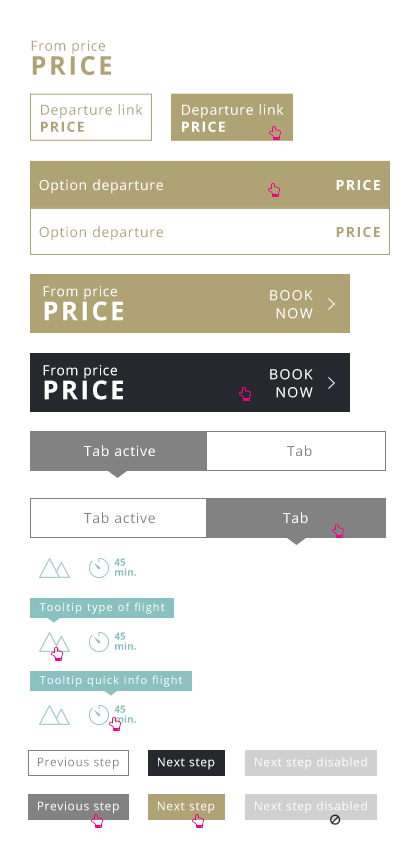
<style>
.page{position:relative;width:420px;height:854px;background:#ffffff}
.page>*{position:absolute;margin:0}
.t1{font:14px/18px "OpenSans";letter-spacing:0.05em;color:#afa376}
.t2{font:26px/24px "OpenSans-Bold";letter-spacing:0.1em;color:#afa376}
.t3{font:14px "OpenSans";letter-spacing:0.05em;color:#afa376}
.t4{font:14px "OpenSans";letter-spacing:0.05em;color:#ffffff}
.t5{font:14px "OpenSans-Bold";letter-spacing:0.1em;color:#afa376;text-transform:uppercase}
.t6{font:14px "OpenSans-Bold";letter-spacing:0.1em;color:#ffffff;text-transform:uppercase}
.t7{font:14px/18px "OpenSans";letter-spacing:0.05em;color:#ffffff}
.t8{font:26px/24px "OpenSans-Bold";letter-spacing:0.1em;color:#ffffff}
.t9{font:14px/18px "OpenSans";letter-spacing:0.1em;color:#ffffff;text-transform:uppercase}
.t10{font:14px "OpenSans";letter-spacing:0.05em;color:#828282}
.t11{font:10px/10px "OpenSans-Bold";color:#8ac0c0}
.t12{font:11px "OpenSans";letter-spacing:0.1em;color:#ffffff}
.t13{font:12px "OpenSans";letter-spacing:0.05em;color:#828282}
.t14{font:12px "OpenSans";letter-spacing:0.05em;color:#ffffff}
</style>
<div class="page">
<p class="t1" style="left:31px;top:40px;width:80px;height:35px">From price<br><span class="t2">PRICE</span></p>
<p class="t3" style="left:41px;top:104px;width:102px;height:14px">Departure link</p>
<p class="t4" style="left:182px;top:104px;width:102px;height:14px">Departure link</p>
<p class="t5" style="left:41px;top:121px;width:43px;height:11px">Price</p>
<p class="t6" style="left:182px;top:121px;width:43px;height:11px">Price</p>
<p class="t4" style="left:39px;top:179px;width:124px;height:15px">Option departure</p>
<p class="t6" style="left:336px;top:179px;width:44px;height:12px">price</p>
<p class="t3" style="left:39px;top:226px;width:124px;height:15px">Option departure</p>
<p class="t5" style="left:336px;top:226px;width:44px;height:12px">Price</p>
<p class="t7" style="left:43px;top:286px;width:80px;height:35px">From price<br><span class="t8">PRICE</span></p>
<p class="t9" style="left:270px;top:290px;width:43px;height:29px;text-align:right">book<br>now</p>
<p class="t7" style="left:43px;top:365px;width:80px;height:35px">From price<br><span class="t8">PRICE</span></p>
<p class="t9" style="left:270px;top:369px;width:43px;height:29px;text-align:right">book<br>now</p>
<p class="t4" style="left:83px;top:445px;width:72px;height:12px">Tab active</p>
<p class="t10" style="left:287px;top:445px;width:25px;height:12px">Tab</p>
<p class="t10" style="left:83px;top:512px;width:72px;height:12px">Tab active</p>
<p class="t4" style="left:283px;top:512px;width:25px;height:12px">Tab</p>
<p class="t11" style="left:114px;top:558px;width:22px;height:18px">45<br>min.</p>
<p class="t12" style="left:39px;top:602px;width:126px;height:12px">Tooltip type of flight</p>
<p class="t11" style="left:114px;top:632px;width:22px;height:18px">45<br>min.</p>
<p class="t12" style="left:39px;top:675px;width:144px;height:12px">Tooltip quick info flight</p>
<p class="t11" style="left:114px;top:705px;width:22px;height:18px">45<br>min.</p>
<p class="t13" style="left:38px;top:757px;width:81px;height:13px">Previous step</p>
<p class="t14" style="left:158px;top:757px;width:57px;height:13px">Next step</p>
<p class="t14" style="left:255px;top:757px;width:112px;height:13px">Next step disabled</p>
<p class="t14" style="left:38px;top:801px;width:81px;height:13px">Previous step</p>
<p class="t14" style="left:158px;top:801px;width:57px;height:13px">Next step</p>
<p class="t14" style="left:255px;top:801px;width:112px;height:13px">Next step disabled</p>
</div>
